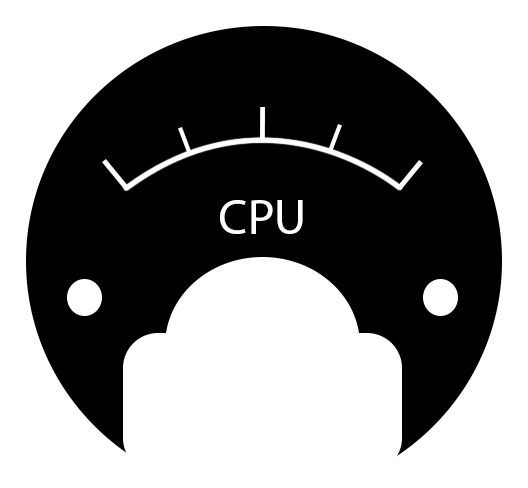
<style>
.page{position:relative;width:528px;height:488px;background:#ffffff}
.page>*{position:absolute;margin:0}
.t1{font:50px "MyriadPro-Regular";color:#ffffff;text-transform:uppercase}
</style>
<div class="page">
<p class="t1" style="left:220px;top:200px;width:83px;height:34px">CPU</p>
</div>
